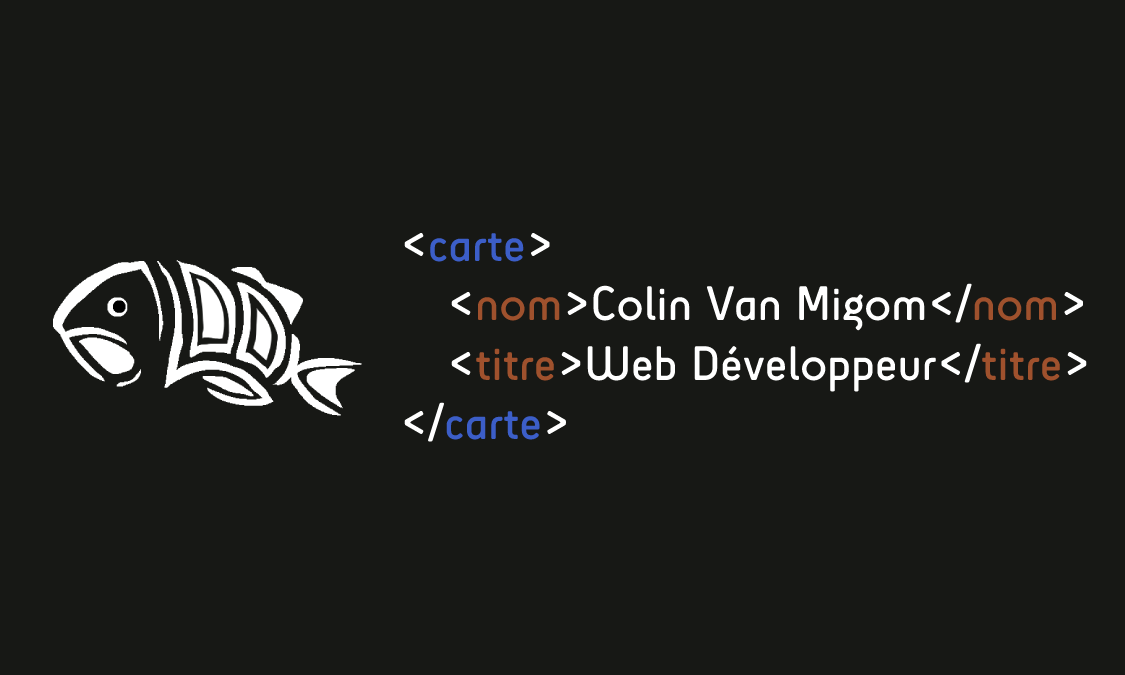
<style>
.page{position:relative;width:1125px;height:675px;background:#171815}
.page>*{position:absolute;margin:0}
.t1{font:49.7px "SciFly-Sans";color:#ffffff}
.t2{font:49.7px "SciFly-Sans";color:#3c5ec8}
.t3{font:49.7px "SciFly-Sans";color:#9f512d}
</style>
<div class="page">
<p class="t1" style="left:404px;top:233px;width:683px;height:209px">&lt;<span class="t2">carte</span>&gt;<br> &lt;<span class="t3">nom</span>&gt;Colin Van Migom&lt;/<span class="t3">nom</span>&gt;<br> &lt;<span class="t3">titre</span>&gt;Web Développeur&lt;/<span class="t3">titre</span>&gt;<br>&lt;/<span class="t2">carte</span>&gt;</p>
</div>
